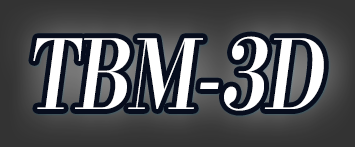
<style>
.page{position:relative;width:355px;height:147px}
.page>*{position:absolute;margin:0}
.t1{font:96px "KochoStd-Heavy";color:#ffffff;font-style:italic;scale:0.75 1}
</style>
<div class="page">
<p class="t1" style="left:33px;top:36px;width:291px;height:75px">TBM-3D</p>
</div>
